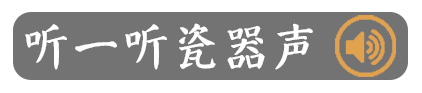
<style>
.page{position:relative;width:422px;height:93px;background:#737373}
.page>*{position:absolute;margin:0}
.t1{font:50px "FZYANZQKSJF--GBK1-0";color:#ffffff}
</style>
<div class="page">
<p class="t1" style="left:25px;top:23px;width:288px;height:47px">听一听瓷器声</p>
</div>
